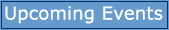
<style>
.page{position:relative;width:169px;height:30px;background:#6699cc}
.page>*{position:absolute;margin:0}
.t1{font:18px "Verdana";letter-spacing:0.01em;color:#ffffff}
</style>
<div class="page">
<p class="t1" style="left:5px;top:6px;width:158px;height:18px">Upcoming Events</p>
</div>
